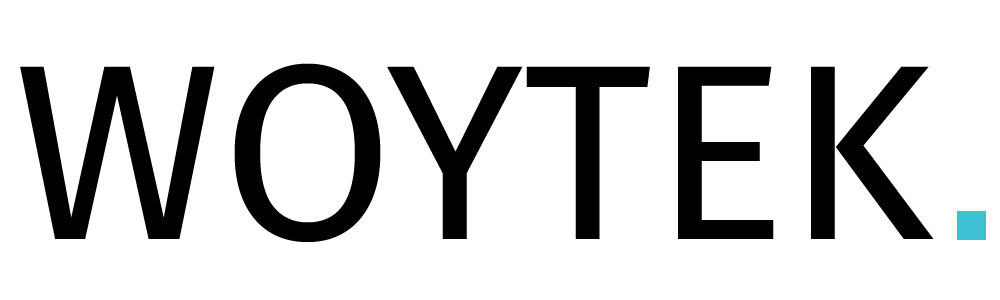
<style>
.page{position:relative;width:1000px;height:300px;background:#ffffff}
.page>*{position:absolute;margin:0}
.t1{font:250px "FiraSans-Regular";color:#000000}
</style>
<div class="page">
<p class="t1" style="left:20px;top:63px;width:914px;height:179px">WOYTEK</p>
</div>
